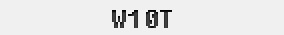
<style>
.page{position:relative;width:284px;height:35px;background:#f0f0f0}
.page>*{position:absolute;margin:0}
.t1{font:24px "Fixedsys";color:#303030}
</style>
<div class="page">
<p class="t1" style="left:112px;top:10px;width:60px;height:18px">W10T</p>
</div>
